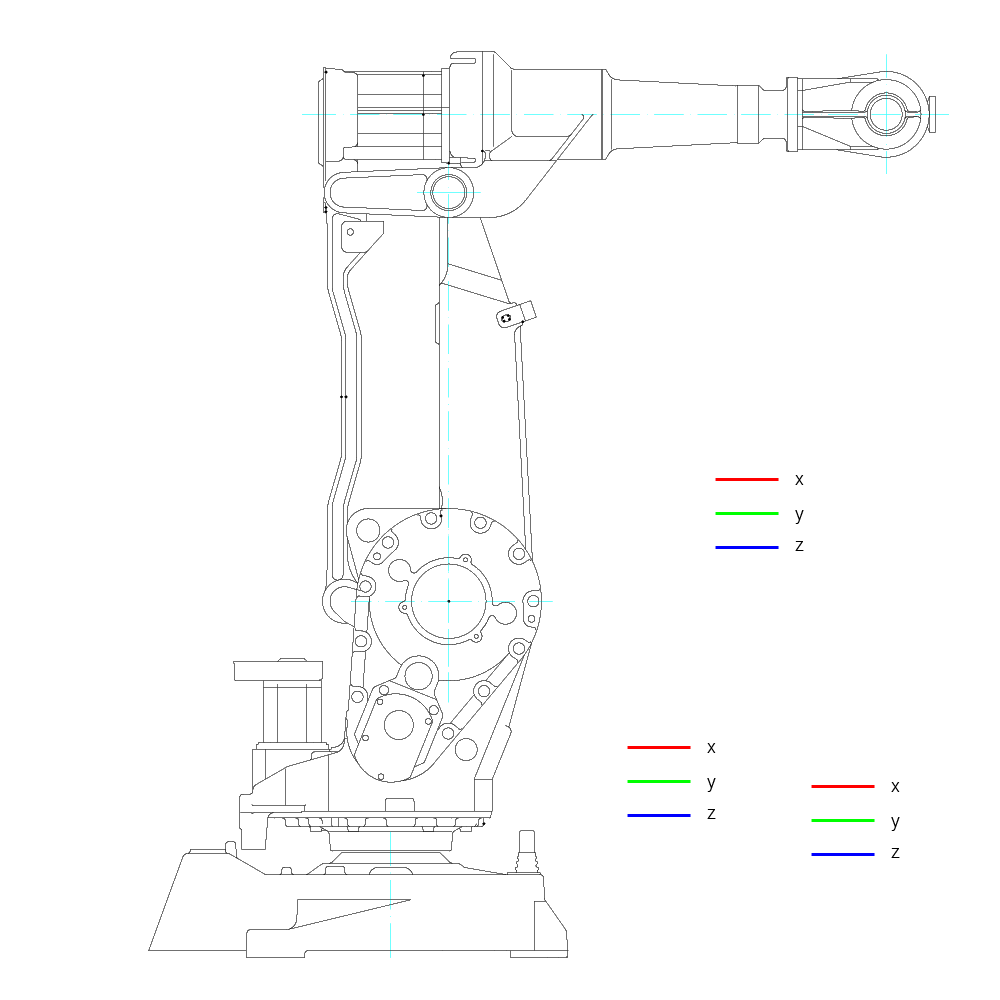
<style>
.page{position:relative;width:1000px;height:1000px;background:#ffffff}
.page>*{position:absolute;margin:0}
.t1{font:18px "Roboto-Light";color:#000000}
</style>
<div class="page">
<p class="t1" style="left:795px;top:475px;width:9px;height:10px">x</p>
<p class="t1" style="left:795px;top:510px;width:9px;height:14px">y</p>
<p class="t1" style="left:795px;top:541px;width:9px;height:10px">z</p>
<p class="t1" style="left:707px;top:743px;width:9px;height:10px">x</p>
<p class="t1" style="left:707px;top:778px;width:9px;height:14px">y</p>
<p class="t1" style="left:891px;top:782px;width:9px;height:10px">x</p>
<p class="t1" style="left:707px;top:809px;width:9px;height:10px">z</p>
<p class="t1" style="left:891px;top:817px;width:9px;height:14px">y</p>
<p class="t1" style="left:891px;top:848px;width:9px;height:10px">z</p>
</div>
